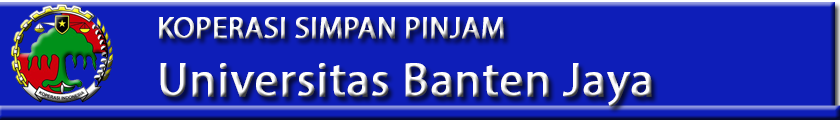
<style>
.page{position:relative;width:840px;height:120px;background:#0e1eb8}
.page>*{position:absolute;margin:0}
.t1{font:48px "MyriadPro-Regular";font-weight:bold}
.t2{font:30px "MyriadPro-Regular";font-weight:bold}
</style>
<div class="page">
<p class="t1" style="left:159px;top:17px;width:493px;height:90px"><span class="t2">KOPERASI SIMPAN PINJAM<br></span>Universitas Banten Jaya</p>
</div>
